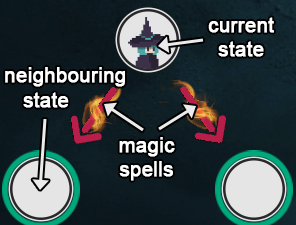
<style>
.page{position:relative;width:296px;height:225px}
.page>*{position:absolute;margin:0}
.t1{font:20px "ArialMT";color:#ffffff;font-weight:bold}
</style>
<div class="page">
<p class="t1" style="left:208px;top:17px;width:66px;height:40px;text-align:center">current<br>state</p>
<p class="t1" style="left:5px;top:67px;width:120px;height:20px">neighbouring</p>
<p class="t1" style="left:23px;top:92px;width:46px;height:16px">state</p>
<p class="t1" style="left:119px;top:137px;width:56px;height:44px;text-align:center">magic<br>spells</p>
</div>
